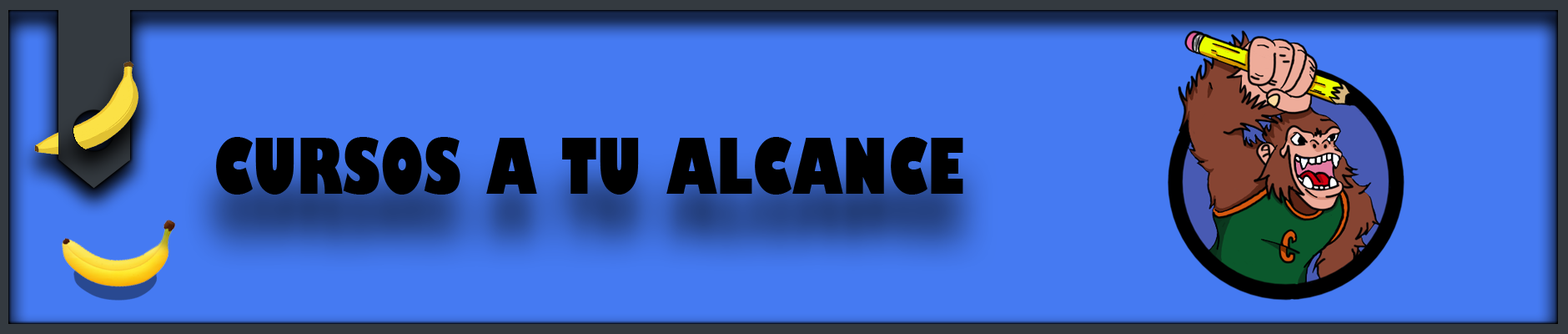
<style>
.page{position:relative;width:1568px;height:334px;background:#457af2}
.page>*{position:absolute;margin:0}
.t1{font:75.1px "GillSans-UltraBoldCondensed";color:#000000}
</style>
<div class="page">
<p class="t1" style="left:216px;top:137px;width:747px;height:57px">CURSOS A TU ALCANCE</p>
</div>
